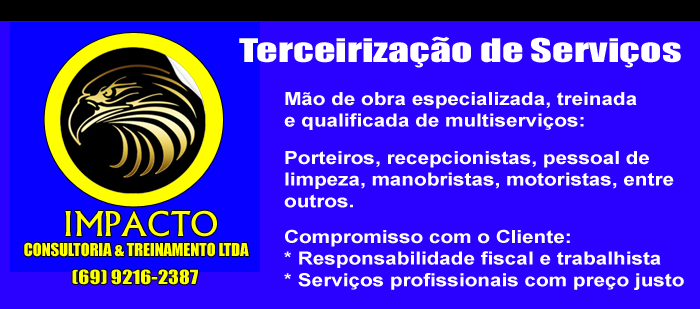
<style>
.page{position:relative;width:700px;height:309px;background:#2a00ff}
.page>*{position:absolute;margin:0}
.t1{font:30px "Impact";color:#ffffff;scale:1.4 1}
.t2{font:18px "Arial-BoldMT";color:#ffffff;scale:1.15 1}
.t3{font:18px "Impact";color:#fcff00;scale:1.15 1}
</style>
<div class="page">
<p class="t1" style="left:239px;top:36px;width:442px;height:32px">Terceirização de Serviços</p>
<p class="t2" style="left:284px;top:92px;width:353px;height:38px">Mão de obra especializada, treinada<br>e qualificada de multiserviços:</p>
<p class="t2" style="left:284px;top:151px;width:390px;height:57px">Porteiros, recepcionistas, pessoal de<br>limpeza, manobristas, motoristas, entre<br>outros.</p>
<p class="t2" style="left:284px;top:229px;width:400px;height:61px">Compromisso com o Cliente:<br>* Responsabilidade fiscal e trabalhista<br>* Serviços profissionais com preço justo</p>
<p class="t3" style="left:72px;top:269px;width:126px;height:16px">(69) 9216-2387</p>
</div>
